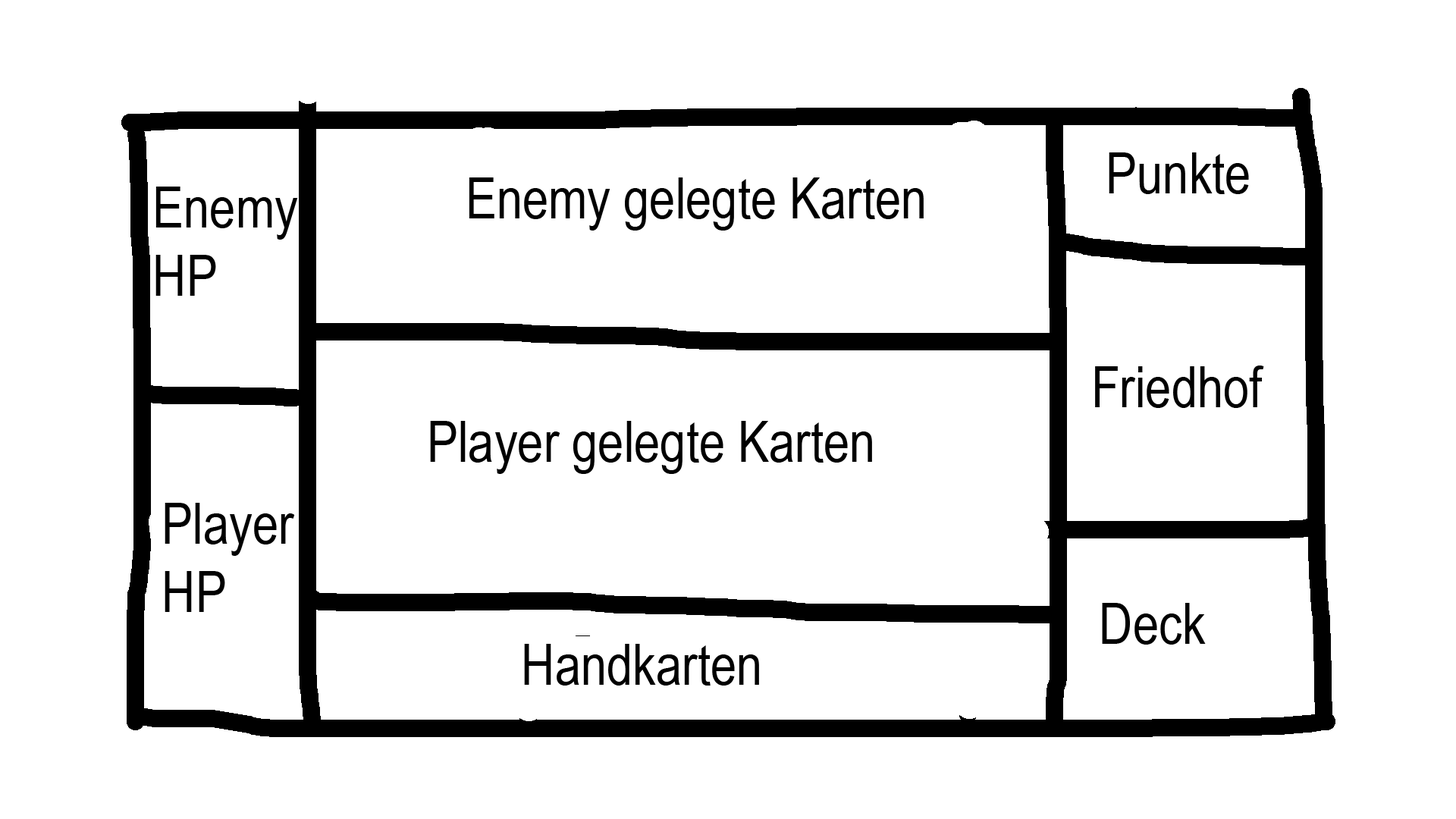
<style>
.page{position:relative;width:1456px;height:819px;background:#ffffff}
.page>*{position:absolute;margin:0}
.t1{font:56.9px "ArialNarrow";color:#000000}
</style>
<div class="page">
<p class="t1" style="left:1109px;top:152px;width:140px;height:42px">Punkte</p>
<p class="t1" style="left:469px;top:177px;width:455px;height:54px">Enemy gelegte Karten</p>
<p class="t1" style="left:155px;top:187px;width:143px;height:109px">Enemy<br>HP</p>
<p class="t1" style="left:1095px;top:366px;width:169px;height:42px">Friedhof</p>
<p class="t1" style="left:430px;top:421px;width:442px;height:53px">Player gelegte Karten</p>
<p class="t1" style="left:165px;top:503px;width:130px;height:109px">Player<br>HP</p>
<p class="t1" style="left:1102px;top:603px;width:104px;height:42px">Deck</p>
<p class="t1" style="left:524px;top:644px;width:235px;height:42px">Handkarten</p>
</div>
